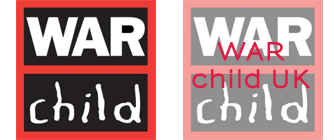
<style>
.page{position:relative;width:334px;height:140px;background:#ffffff}
.page>*{position:absolute;margin:0}
.t1{font:23px "Sansumi-Bold";letter-spacing:0.06em;color:#e41a41;font-weight:bold}
</style>
<div class="page">
<p class="t1" style="left:192px;top:42px;width:118px;height:47px;text-align:center">WAR<br>child UK</p>
</div>
